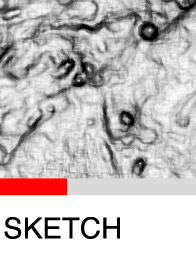
<style>
.page{position:relative;width:196px;height:264px;background:#ffffff}
.page>*{position:absolute;margin:0}
.t1{font:28.9px "Helvetica";color:#000000}
</style>
<div class="page">
<p class="t1" style="left:4px;top:217px;width:116px;height:22px">SKETCH</p>
</div>
